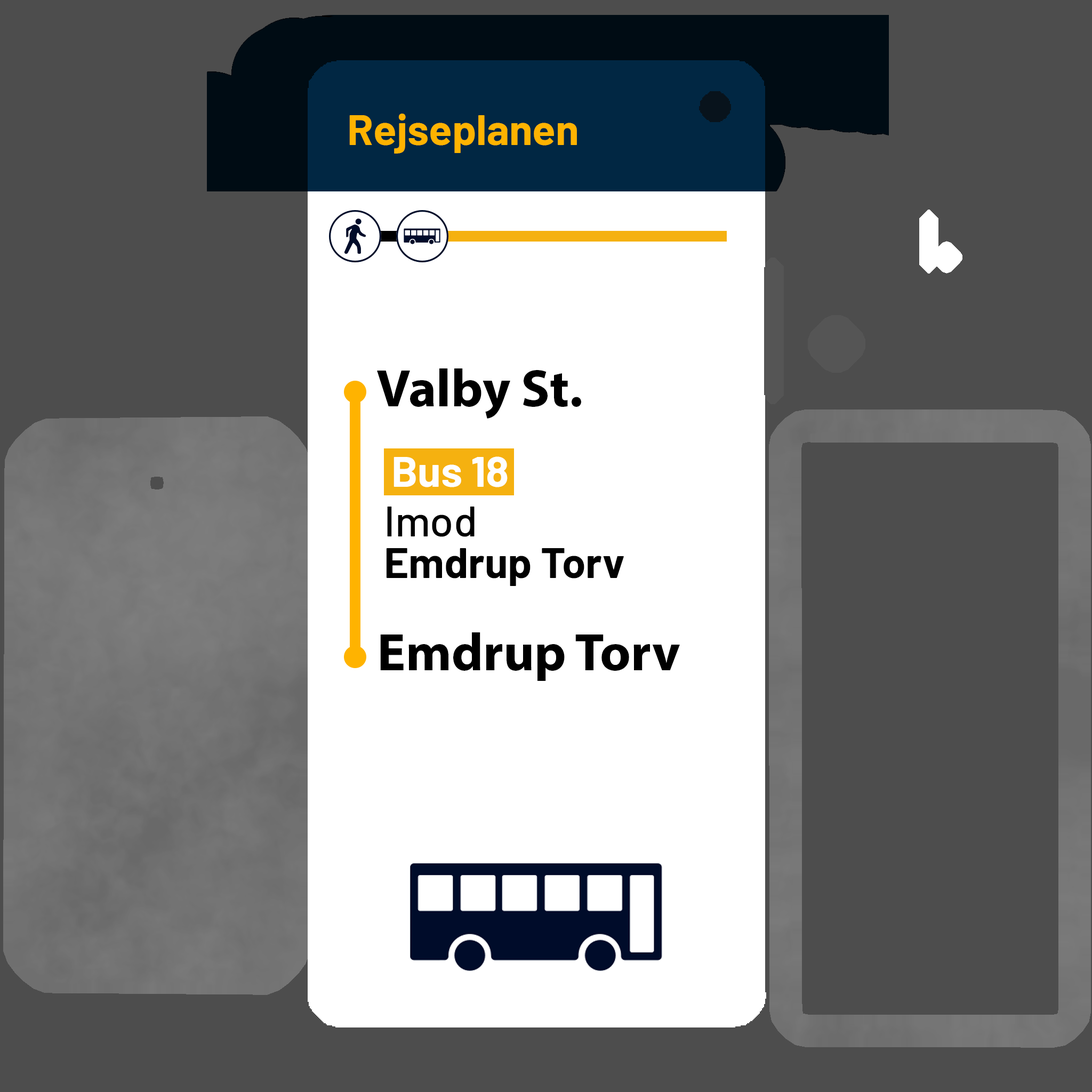
<style>
.page{position:relative;width:1092px;height:1092px;background:#4d4d4d}
.page>*{position:absolute;margin:0}
.t1{font:42.7px "Barlow-Bold";color:#ffb300}
.t2{font:53.3px "MyriadPro-Bold";color:#000000}
.t3{font:42.7px "Barlow-Bold";color:#fefefe}
.t4{font:42.7px "Barlow-Medium";color:#010101}
.t5{font:42.7px "Barlow-Bold";color:#010101}
</style>
<div class="page">
<p class="t1" style="left:349px;top:114px;width:228px;height:40px">Rejseplanen</p>
<p class="t2" style="left:377px;top:368px;width:204px;height:51px">Valby St.</p>
<p class="t3" style="left:393px;top:456px;width:115px;height:31px">Bus 18</p>
<p class="t4" style="left:387px;top:507px;width:88px;height:30px">Imod</p>
<p class="t5" style="left:386px;top:548px;width:238px;height:38px">Emdrup Torv</p>
<p class="t2" style="left:380px;top:632px;width:300px;height:49px">Emdrup Torv</p>
</div>
